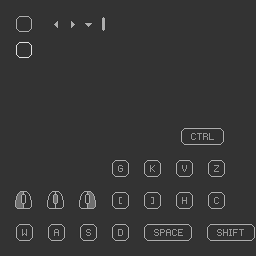
<style>
.page{position:relative;width:256px;height:256px;background:#333333}
.page>*{position:absolute;margin:0}
.t1{font:16px "Pixie";color:#999999}
</style>
<div class="page">
<p class="t1" style="left:191px;top:133px;width:23px;height:7px">CTRL</p>
<p class="t1" style="left:118px;top:165px;width:5px;height:7px">G</p>
<p class="t1" style="left:150px;top:165px;width:5px;height:7px">K</p>
<p class="t1" style="left:182px;top:165px;width:5px;height:7px">V</p>
<p class="t1" style="left:214px;top:165px;width:5px;height:7px">Z</p>
<p class="t1" style="left:119px;top:197px;width:3px;height:7px">[</p>
<p class="t1" style="left:151px;top:197px;width:3px;height:7px">]</p>
<p class="t1" style="left:182px;top:197px;width:5px;height:7px">H</p>
<p class="t1" style="left:214px;top:197px;width:5px;height:7px">C</p>
<p class="t1" style="left:22px;top:229px;width:5px;height:7px">W</p>
<p class="t1" style="left:54px;top:229px;width:5px;height:7px">A</p>
<p class="t1" style="left:86px;top:229px;width:5px;height:7px">S</p>
<p class="t1" style="left:118px;top:229px;width:5px;height:7px">D</p>
<p class="t1" style="left:154px;top:229px;width:29px;height:7px">SPACE</p>
<p class="t1" style="left:217px;top:229px;width:27px;height:7px">SHIFT</p>
</div>
